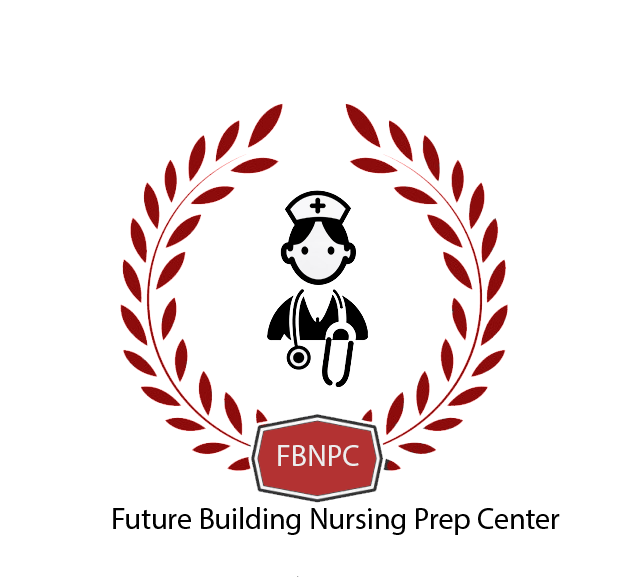
<style>
.page{position:relative;width:626px;height:577px;background:#ffffff}
.page>*{position:absolute;margin:0}
.t1{font:30px "MyriadPro-Regular";color:#ededed}
.t2{font:30.4px "MyriadPro-Regular";color:#000000}
</style>
<div class="page">
<p class="t1" style="left:278px;top:445px;width:81px;height:21px">FBNPC</p>
<p class="t2" style="left:113px;top:507px;width:447px;height:28px">Future Building Nursing Prep Center</p>
</div>
